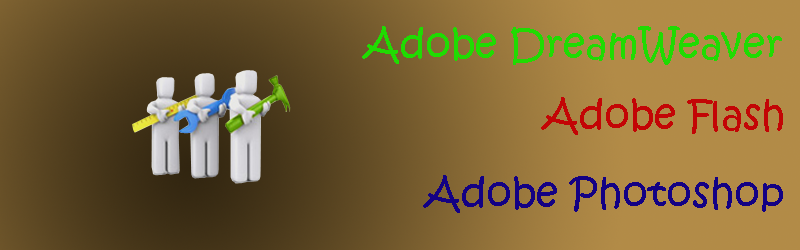
<style>
.page{position:relative;width:800px;height:250px}
.page>*{position:absolute;margin:0}
.t1{font:40px "KristenITC-Regular";color:#20db02}
.t2{font:40px "KristenITC-Regular";color:#c30505}
.t3{font:40px "KristenITC-Regular";color:#130184}
</style>
<div class="page">
<p class="t1" style="left:362px;top:26px;width:420px;height:39px">Adobe DreamWeaver</p>
<p class="t2" style="left:541px;top:97px;width:242px;height:38px">Adobe Flash</p>
<p class="t3" style="left:423px;top:175px;width:360px;height:38px">Adobe Photoshop</p>
</div>
